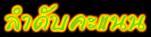
<style>
.page{position:relative;width:151px;height:37px;background:#000000}
.page>*{position:absolute;margin:0}
.t1{font:36px "DsSupasawatD";color:#70d70b}
</style>
<div class="page">
<p class="t1" style="left:6px;top:4px;width:139px;height:26px">ÅÓ´Ñº¤Ðá¹¹</p>
</div>
